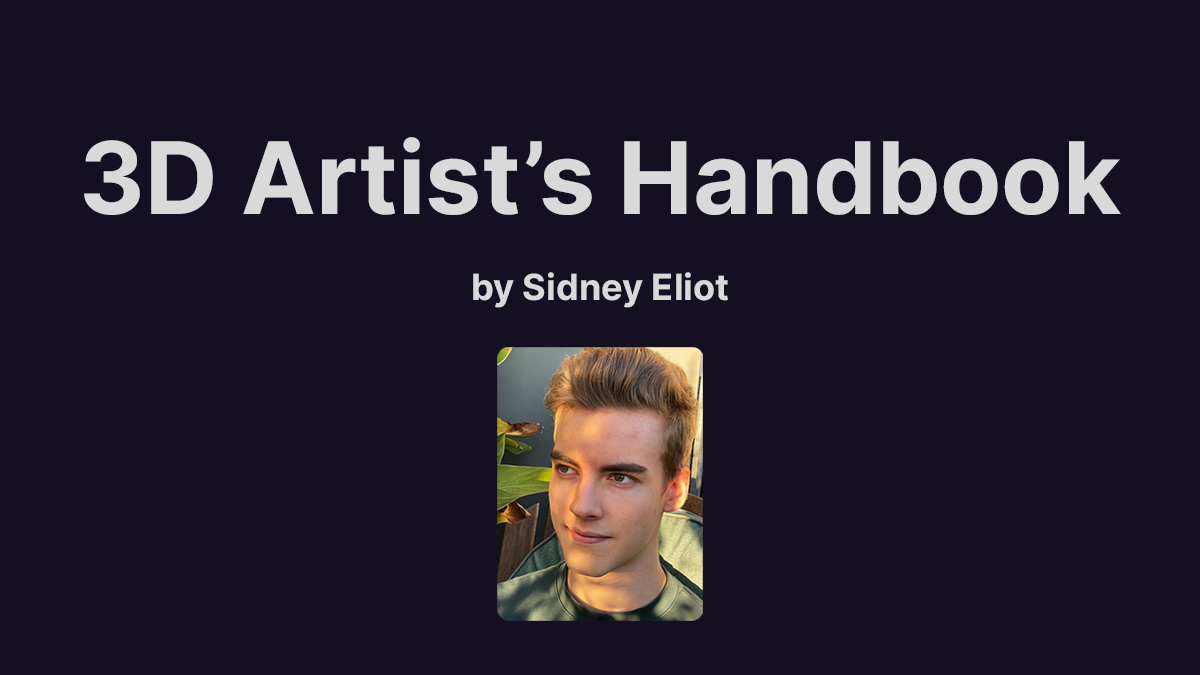
<style>
.page{position:relative;width:1200px;height:675px;background:#141021}
.page>*{position:absolute;margin:0}
.t1{font:100px "Inter-Bold";color:#d9d9d9}
.t2{font:36px "Inter-Bold";color:#d9d9d9}
</style>
<div class="page">
<p class="t1" style="left:84px;top:137px;width:1037px;height:78px">3D Artist’s Handbook</p>
<p class="t2" style="left:473px;top:272px;width:255px;height:36px">by Sidney Eliot</p>
</div>
